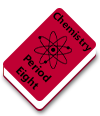
<style>
.page{position:relative;width:100px;height:116px;background:#ffffff}
.page>*{position:absolute;margin:0}
.t1{font:10.7px "LaoUI-Bold";color:#000000}
.t2{font:11.4px "LaoUI-Bold";color:#000000}
</style>
<div class="page">
<p class="t1" style="left:53px;top:12px;width:39px;height:40px;rotate:45deg">Chemistry</p>
<p class="t2" style="left:15px;top:54px;width:37px;height:36px;text-align:center;rotate:45deg">Period<br>Eight</p>
</div>
